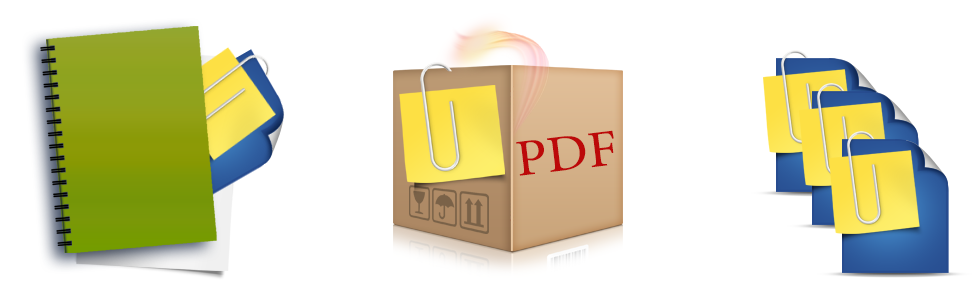
<style>
.page{position:relative;width:980px;height:300px;background:#ffffff}
.page>*{position:absolute;margin:0}
.t1{font:72.8px "AdobeArabic-Regular";color:#bc0909}
</style>
<div class="page">
<p class="t1" style="left:516px;top:130px;width:98px;height:46px;rotate:-7deg">PDF</p>
</div>
